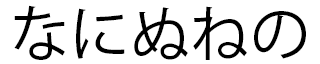
<style>
.page{position:relative;width:320px;height:64px;background:#ffffff}
.page>*{position:absolute;margin:0}
.t1{font:60px "KozGoPr6N-Regular";color:#000000}
</style>
<div class="page">
<p class="t1" style="left:14px;top:5px;width:292px;height:55px">なにぬねの</p>
</div>
